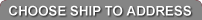
<style>
.page{position:relative;width:202px;height:20px;background:#858585}
.page>*{position:absolute;margin:0}
.t1{font:13.3px "Arial-BoldMT";color:#ffffff}
</style>
<div class="page">
<p class="t1" style="left:9px;top:5px;width:182px;height:11px">CHOOSE SHIP TO ADDRESS</p>
</div>
